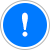
<style>
.page{position:relative;width:50px;height:50px;background:#007aff}
.page>*{position:absolute;margin:0}
.t1{font:37.5px "KannadaMN-Bold";letter-spacing:-0.01em;color:#ffffff}
</style>
<div class="page">
<p class="t1" style="left:22px;top:12px;width:6px;height:25px">!</p>
</div>
